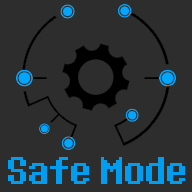
<style>
.page{position:relative;width:192px;height:192px;background:#2d2d2d}
.page>*{position:absolute;margin:0}
.t1{font:36px "BIG-SHOT";letter-spacing:-0.08em;color:#009df0}
</style>
<div class="page">
<p class="t1" style="left:8px;top:157px;width:81px;height:27px">Safe</p>
<p class="t1" style="left:101px;top:157px;width:84px;height:27px">Mode</p>
</div>
